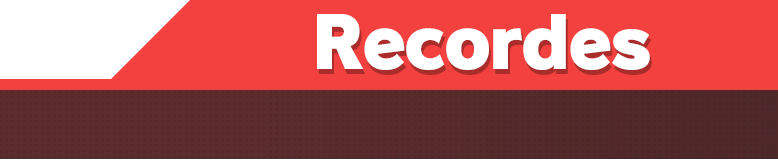
<style>
.page{position:relative;width:778px;height:160px;background:#f3413f}
.page>*{position:absolute;margin:0}
.t1{font:70.7px "RodinPro-UB";letter-spacing:-0.036em;color:#ffffff}
</style>
<div class="page">
<p class="t1" style="left:317px;top:14px;width:333px;height:56px">Recordes</p>
</div>
